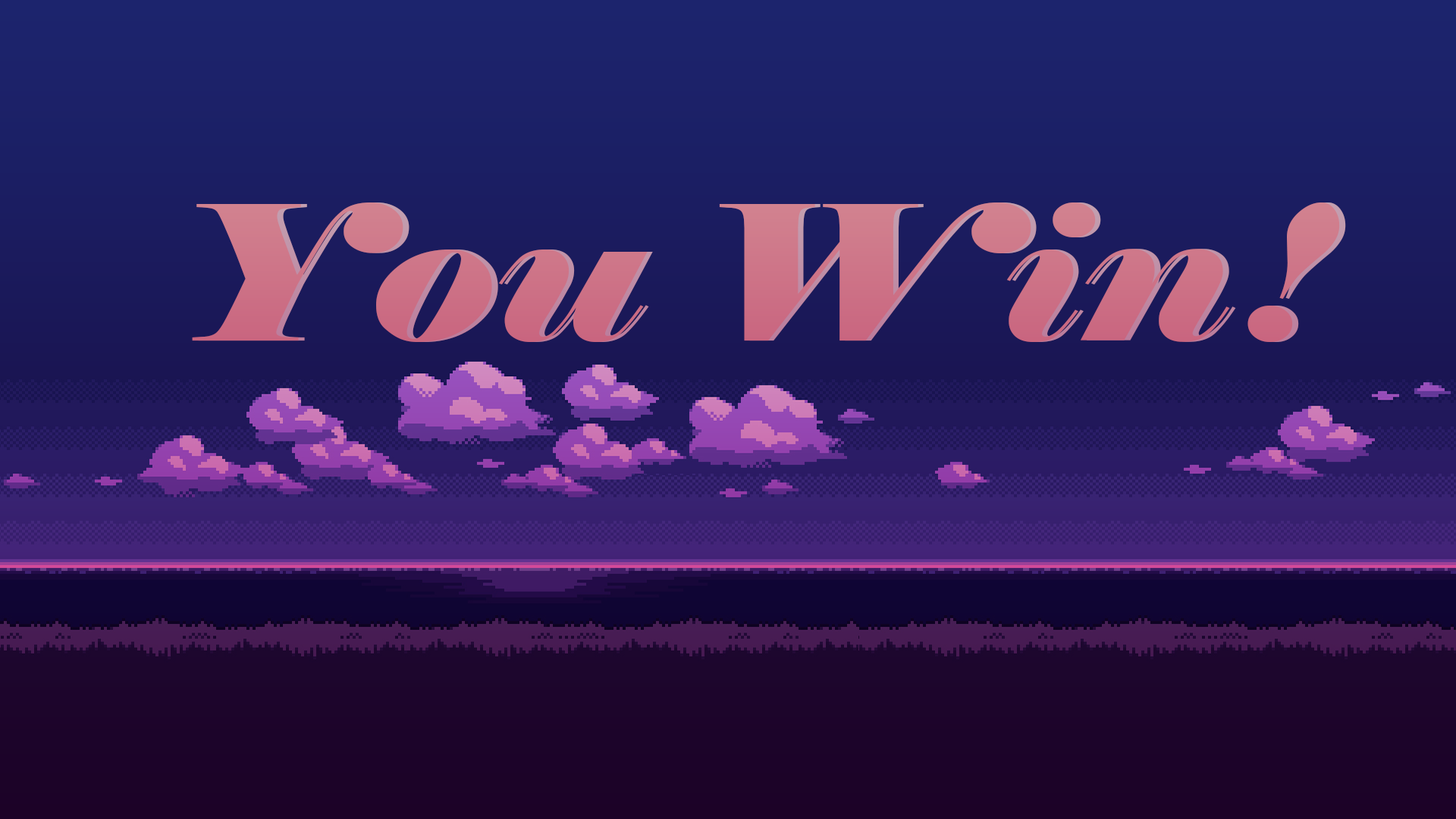
<style>
.page{position:relative;width:1456px;height:819px}
.page>*{position:absolute;margin:0}
.t1{font:187.5px "Elephant-Italic";color:#cd7387;scale:1.19 1}
.t2{font:187.5px "Elephant-Italic";color:#cc7588;scale:1.19 1}
</style>
<div class="page">
<p class="t1" style="left:192px;top:202px;width:1148px;height:140px">You Win!</p>
<p class="t2" style="left:198px;top:202px;width:1148px;height:140px">You Win!</p>
</div>
